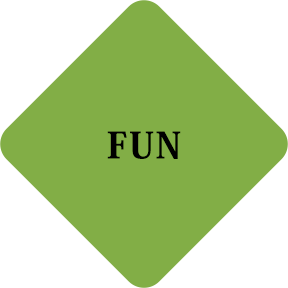
<style>
.page{position:relative;width:288px;height:288px;background:#82ae46}
.page>*{position:absolute;margin:0}
.t1{font:36px "KozMinPro-Heavy";letter-spacing:0.04em;color:#000000}
</style>
<div class="page">
<p class="t1" style="left:107px;top:131px;width:74px;height:28px">FUN</p>
</div>
